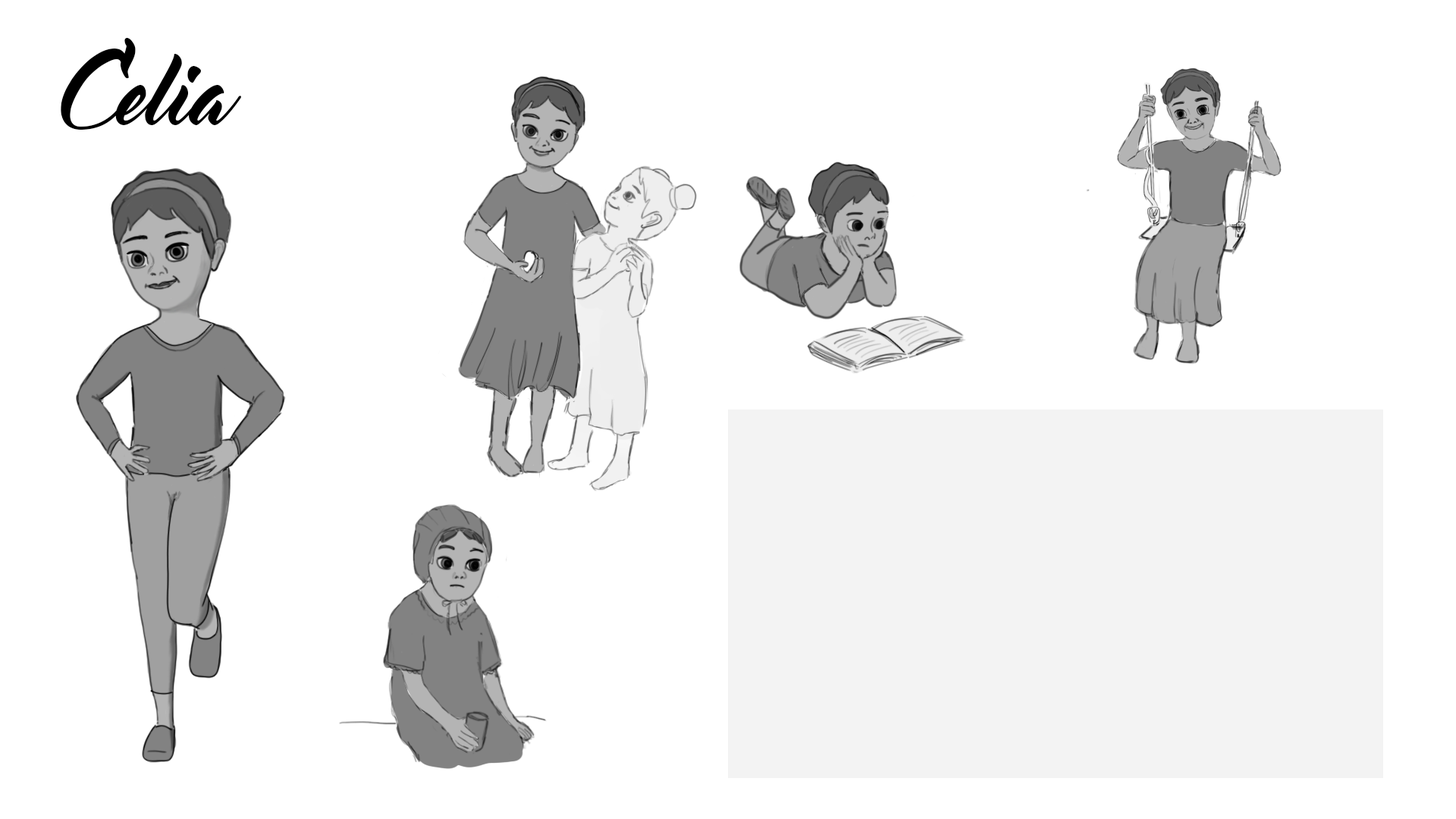
<style>
.page{position:relative;width:1456px;height:819px;background:#ffffff}
.page>*{position:absolute;margin:0}
.t1{font:80.2px "MasterOfBreak";color:#000000}
</style>
<div class="page">
<p class="t1" style="left:61px;top:38px;width:180px;height:92px">Celia</p>
</div>
